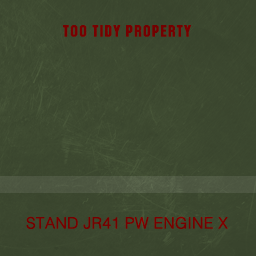
<style>
.page{position:relative;width:256px;height:256px}
.page>*{position:absolute;margin:0}
.t1{font:15px "Danger";letter-spacing:0.1em;color:#760000;font-weight:bold}
.t2{font:15.4px "Helvetica-Light";color:#760000;font-weight:bold}
</style>
<div class="page">
<p class="t1" style="left:63px;top:25px;width:128px;height:12px">TOO TIDY PROPERTY</p>
<p class="t2" style="left:26px;top:216px;width:202px;height:13px">STAND JR41 PW ENGINE X</p>
</div>
